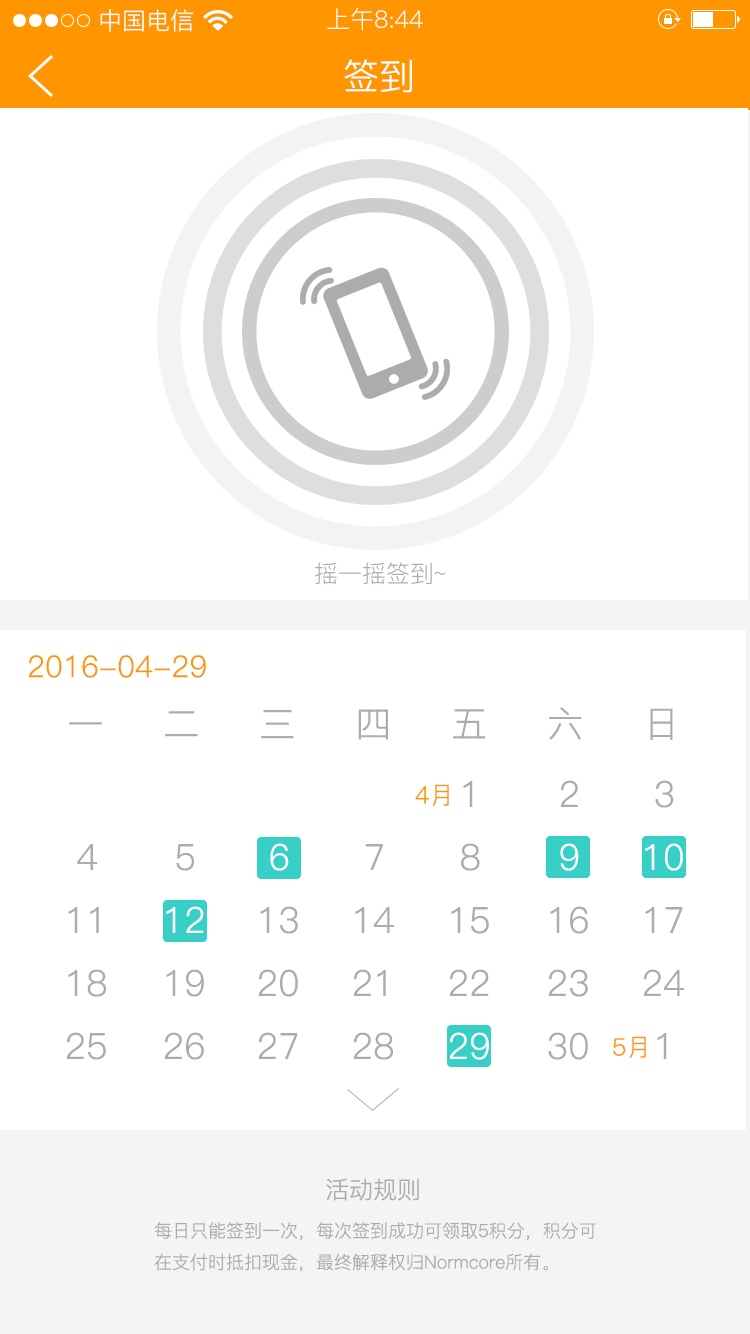
<style>
.page{position:relative;width:750px;height:1334px;background:#ffffff}
.page>*{position:absolute;margin:0}
.t1{font:24px "PingFang-SC-Regular";color:#ffffff}
.t2{font:36px "PingFang-SC-Regular";color:#ffffff}
.t3{font:24px "PingFang-SC-Regular";color:#acacac}
.t4{font:30px "PingFang-SC-Regular";color:#ff9500}
.t5{font:36px "PingFang-SC-Regular";color:#acacac}
.t6{font:24px "PingFang-SC-Regular";color:#ff9500}
.t7{font:18px "PingFang-SC-Regular";color:#acacac}
</style>
<div class="page">
<p class="t1" style="left:100px;top:9px;width:94px;height:23px">中国电信</p>
<p class="t1" style="left:327px;top:8px;width:96px;height:23px">上午8:44</p>
<p class="t2" style="left:344px;top:59px;width:68px;height:34px">签到</p>
<p class="t3" style="left:314px;top:562px;width:132px;height:23px">摇一摇签到~</p>
<p class="t4" style="left:29px;top:655px;width:177px;height:23px">2016-04-29</p>
<p class="t5" style="left:69px;top:707px;width:604px;height:33px">一     二     三     四     五     六     日</p>
<p class="t6" style="left:415px;top:784px;width:34px;height:22px">4月</p>
<p class="t5" style="left:449px;top:781px;width:40px;height:279px">1<br>  8<br> 15<br> 22<br><span class="t2"> 29</span></p>
<p class="t5" style="left:548px;top:780px;width:40px;height:280px">2<br>  <span class="t2">9<br></span> 16<br> 23<br> 30</p>
<p class="t5" style="left:643px;top:780px;width:41px;height:279px">3<br> <span class="t2">10<br></span> 17<br> 24<br>  1</p>
<p class="t5" style="left:66px;top:844px;width:40px;height:216px">4<br> 11<br> 18<br> 25</p>
<p class="t5" style="left:164px;top:844px;width:40px;height:216px">5<br><span class="t2"> 12<br></span> 19<br> 26</p>
<p class="t5" style="left:258px;top:843px;width:40px;height:216px"><span class="t2">6<br></span> 13<br> 20<br> 27</p>
<p class="t5" style="left:353px;top:844px;width:41px;height:216px">7<br> 14<br> 21<br> 28</p>
<p class="t6" style="left:613px;top:1036px;width:33px;height:22px">5月</p>
<p class="t3" style="left:326px;top:1178px;width:93px;height:23px">活动规则</p>
<p class="t7" style="left:154px;top:1222px;width:442px;height:50px">每日只能签到一次，每次签到成功可领取5积分，积分可<br>在支付时抵扣现金，最终解释权归Normcore所有。</p>
</div>
